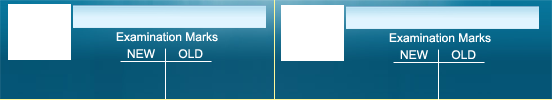
<style>
.page{position:relative;width:552px;height:100px}
.page>*{position:absolute;margin:0}
.t1{font:12px "ArialMT";color:#ffffff}
</style>
<div class="page">
<p class="t1" style="left:116px;top:32px;width:102px;height:10px">Examination Marks</p>
<p class="t1" style="left:389px;top:33px;width:102px;height:10px">Examination Marks</p>
<p class="t1" style="left:127px;top:49px;width:76px;height:10px">NEW       OLD</p>
<p class="t1" style="left:400px;top:50px;width:76px;height:10px">NEW       OLD</p>
</div>
